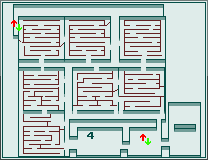
<style>
.page{position:relative;width:208px;height:160px;background:#dfecea}
.page>*{position:absolute;margin:0}
.t1{font:8px "PressStart2P-Regular";color:#054e47}
</style>
<div class="page">
<p class="t1" style="left:87px;top:132px;width:7px;height:7px">4</p>
</div>
